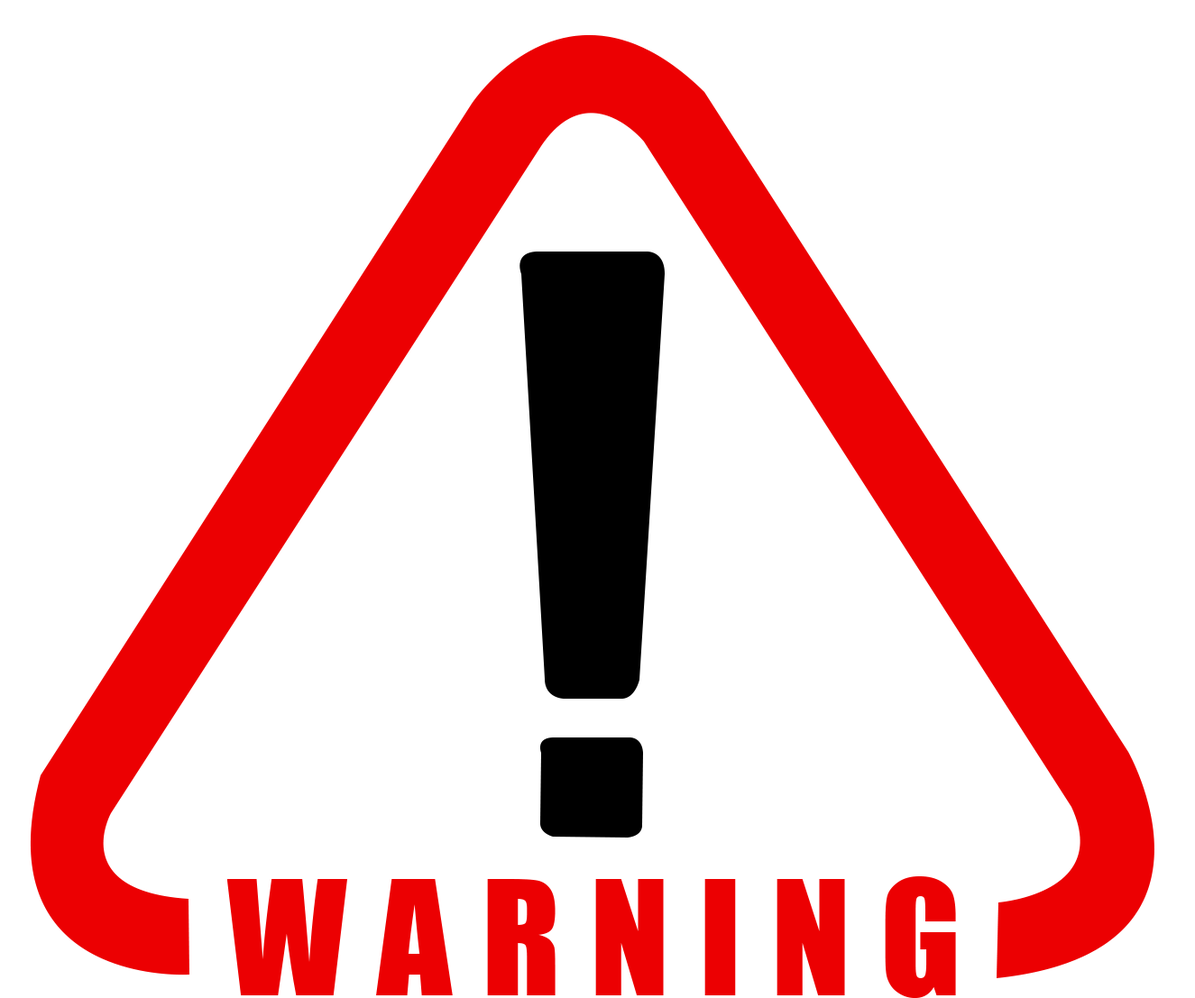
<style>
.page{position:relative;width:1195px;height:998px;background:#ffffff}
.page>*{position:absolute;margin:0}
.t1{font:147.3px "Impact";letter-spacing:0.2em;color:#ec0002}
</style>
<div class="page">
<p class="t1" style="left:227px;top:876px;width:729px;height:122px">WARNING</p>
</div>
